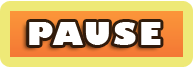
<style>
.page{position:relative;width:193px;height:67px;background:#eee977}
.page>*{position:absolute;margin:0}
.t1{font:30.5px "GillSans-UltraBold";letter-spacing:0.1em;color:#ffffff}
</style>
<div class="page">
<p class="t1" style="left:29px;top:22px;width:132px;height:23px">PAUSE</p>
</div>
